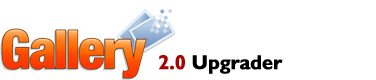
<style>
.page{position:relative;width:376px;height:80px;background:#ffffff}
.page>*{position:absolute;margin:0}
.t1{font:20px "GillSans-Bold";letter-spacing:-0.025em;color:#000000;font-weight:bold}
.t2{font:20px "GillSans-Bold";letter-spacing:-0.025em;color:#a60200;font-weight:bold}
</style>
<div class="page">
<p class="t1" style="left:159px;top:55px;width:124px;height:19px"><span class="t2">2.0 </span>Upgrader</p>
</div>
